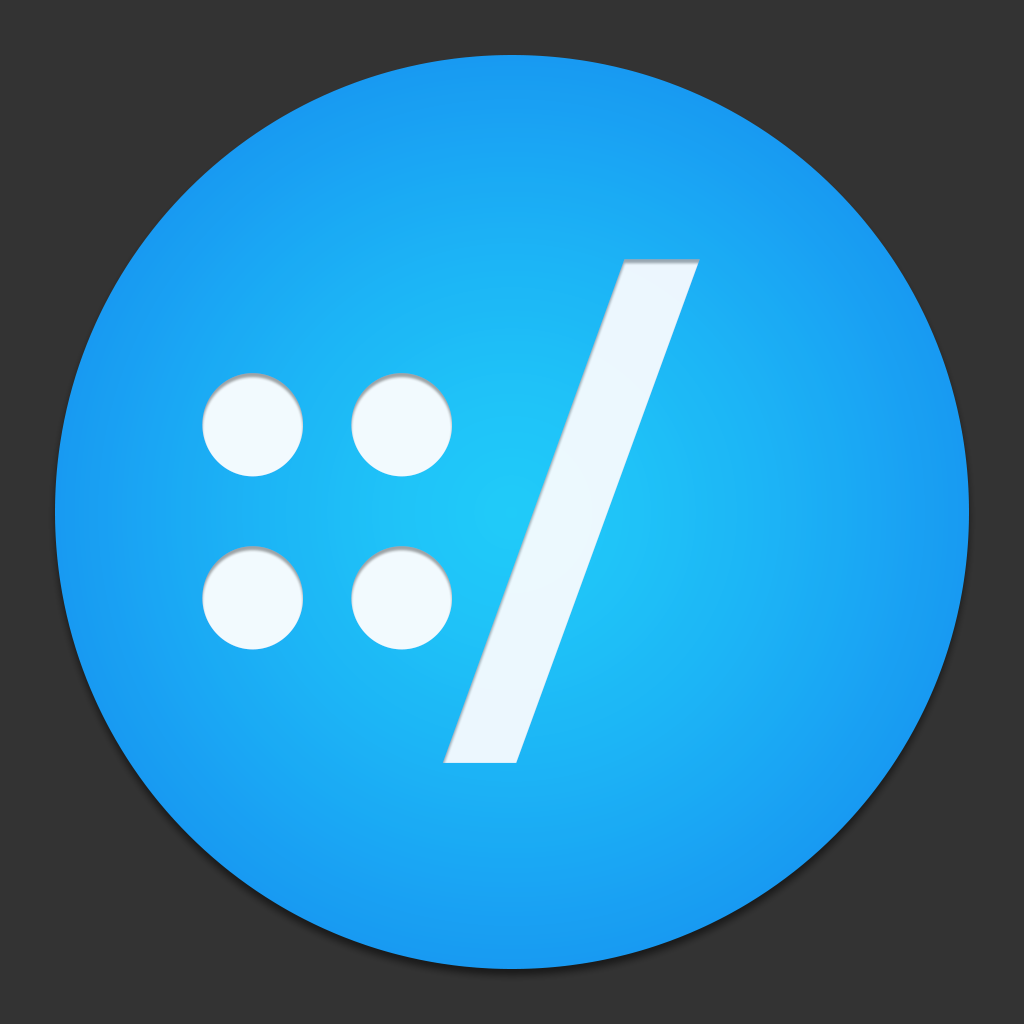
<style>
.page{position:relative;width:1024px;height:1024px;background:#333333}
.page>*{position:absolute;margin:0}
.t1{font:547.7px "SFMono-Bold";letter-spacing:-0.3em;color:#ffffff}
.t2{font:468.2px "SFMono-Bold";letter-spacing:-0.3em;color:#ffffff}
.t3{font:468.2px "SFMono-Bold";letter-spacing:-0.26em;color:#ffffff}
</style>
<div class="page">
<p class="t1" style="left:442px;top:259px;width:258px;height:504px;opacity:0.88">/</p>
<p class="t2" style="left:202px;top:373px;width:251px;height:277px">:<span class="t3">:</span></p>
</div>
